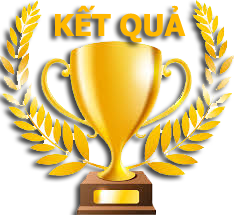
<style>
.page{position:relative;width:234px;height:215px;background:#ffffff}
.page>*{position:absolute;margin:0}
.t1{font:30px "Tahoma-Bold";color:#ffb800}
</style>
<div class="page">
<p class="t1" style="left:55px;top:5px;width:131px;height:38px">KẾT QUẢ</p>
</div>
